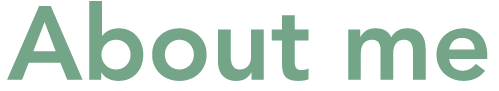
<style>
.page{position:relative;width:499px;height:91px;background:#ffffff}
.page>*{position:absolute;margin:0}
.t1{font:103.8px "Avenir-Heavy";color:#74a588}
</style>
<div class="page">
<p class="t1" style="left:7px;top:1px;width:481px;height:80px">About me</p>
</div>
